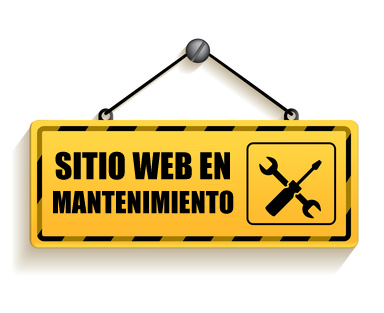
<style>
.page{position:relative;width:384px;height:313px;background:#ffffff}
.page>*{position:absolute;margin:0}
.t1{font:28.3px "Impact";color:#000000}
.t2{font:34px "Impact";color:#000000}
</style>
<div class="page">
<p class="t1" style="left:53px;top:151px;width:181px;height:63px;text-align:center"><span class="t2">SITIO WEB EN<br></span>MANTENIMIENTO</p>
</div>
